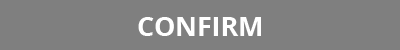
<style>
.page{position:relative;width:400px;height:50px;background:#7f7f7f}
.page>*{position:absolute;margin:0}
.t1{font:26.7px "OpenSans-Bold";color:#ffffff}
</style>
<div class="page">
<p class="t1" style="left:138px;top:17px;width:123px;height:19px">CONFIRM</p>
</div>
